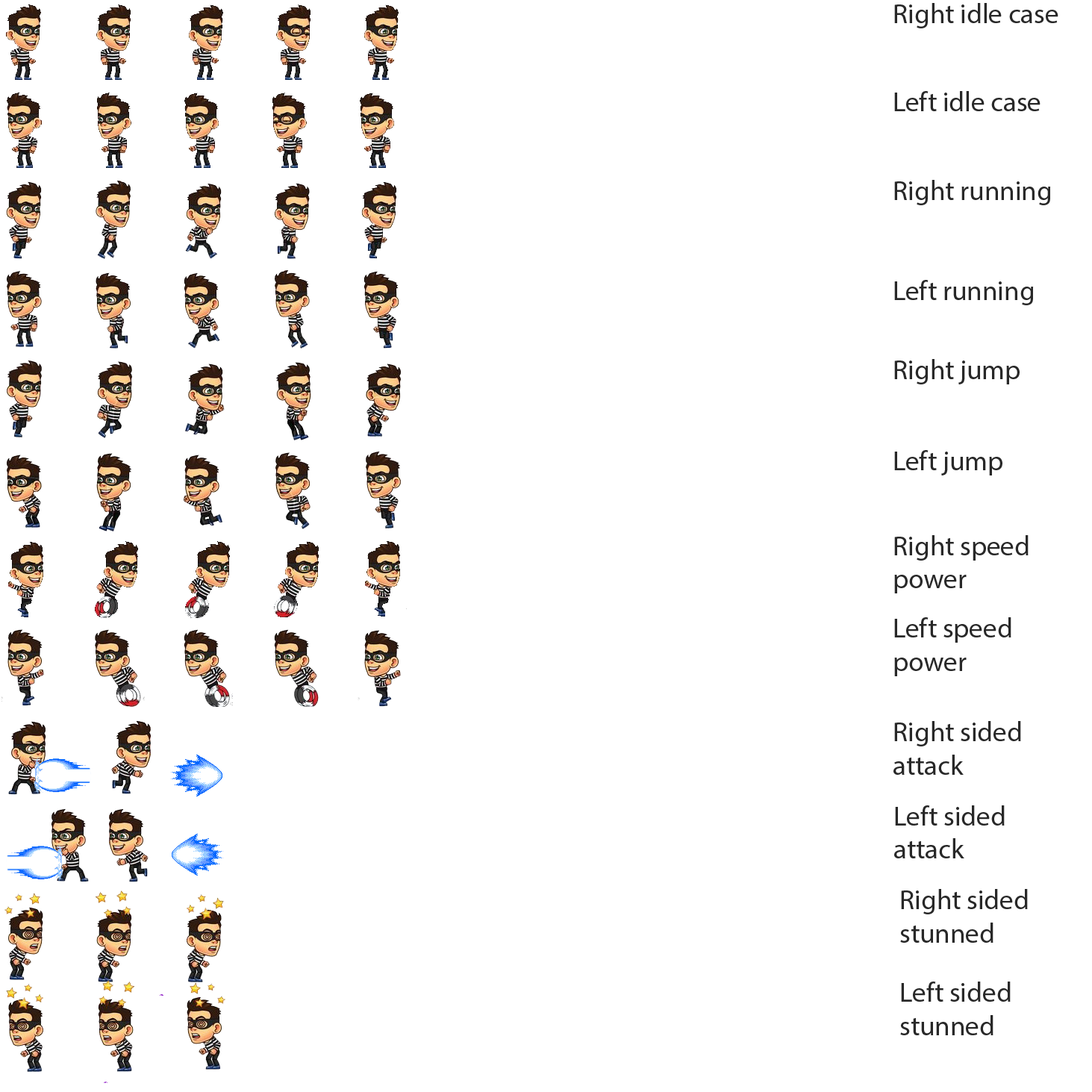
<style>
.page{position:relative;width:1092px;height:1092px;background:#ffffff}
.page>*{position:absolute;margin:0}
.t1{font:27.6px "MyriadPro-Regular";color:#282828}
</style>
<div class="page">
<p class="t1" style="left:894px;top:3px;width:164px;height:25px">Right idle case</p>
<p class="t1" style="left:894px;top:91px;width:146px;height:20px">Left idle case</p>
<p class="t1" style="left:894px;top:180px;width:157px;height:25px">Right running</p>
<p class="t1" style="left:894px;top:280px;width:140px;height:25px">Left running</p>
<p class="t1" style="left:894px;top:359px;width:126px;height:25px">Right jump</p>
<p class="t1" style="left:894px;top:450px;width:108px;height:25px">Left jump</p>
<p class="t1" style="left:894px;top:535px;width:135px;height:58px">Right speed power</p>
<p class="t1" style="left:894px;top:617px;width:117px;height:59px">Left speed  power</p>
<p class="t1" style="left:893px;top:721px;width:128px;height:54px">Right sided attack</p>
<p class="t1" style="left:894px;top:805px;width:111px;height:53px">Left sided   attack</p>
<p class="t1" style="left:900px;top:889px;width:128px;height:54px">Right sided stunned</p>
<p class="t1" style="left:900px;top:982px;width:111px;height:53px">Left sided stunned</p>
</div>
